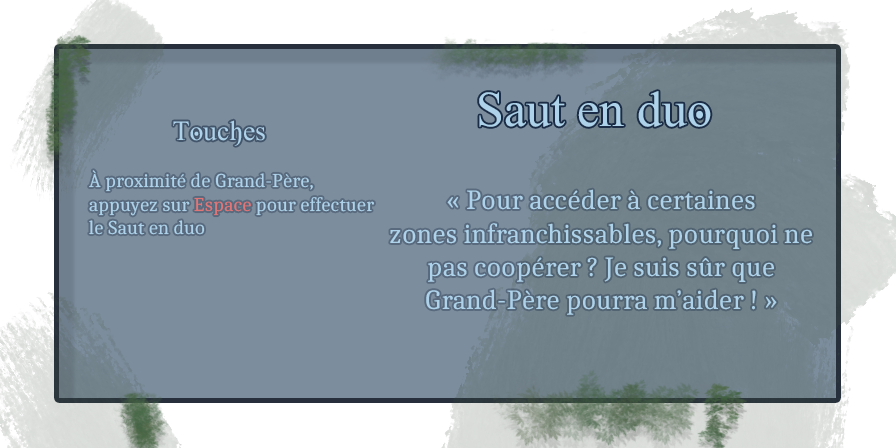
<style>
.page{position:relative;width:896px;height:448px;background:#7c8d9d}
.page>*{position:absolute;margin:0}
.t1{font:50px "GhostTheory";color:#add2e9}
.t2{font:27.8px "GhostTheory";color:#add2e9}
.t3{font:19.4px "Caladea-Regular";color:#add2e9}
.t4{font:19.4px "Caladea-Regular";color:#e27676}
.t5{font:27.8px "Caladea-Regular";color:#add2e9}
</style>
<div class="page">
<p class="t1" style="left:479px;top:91px;width:232px;height:36px">Saut en duo</p>
<p class="t2" style="left:173px;top:120px;width:92px;height:26px">Touches :</p>
<p class="t3" style="left:89px;top:170px;width:285px;height:65px">À proximité de Grand-Père, <br>appuyez sur <span class="t4">Espace </span>pour effectuer<br>le Saut en duo</p>
<p class="t5" style="left:390px;top:189px;width:422px;height:126px;text-align:center">« Pour accéder à certaines <br>zones infranchissables, pourquoi ne pas coopérer ? Je suis sûr que <br>Grand-Père pourra m’aider ! »</p>
</div>
